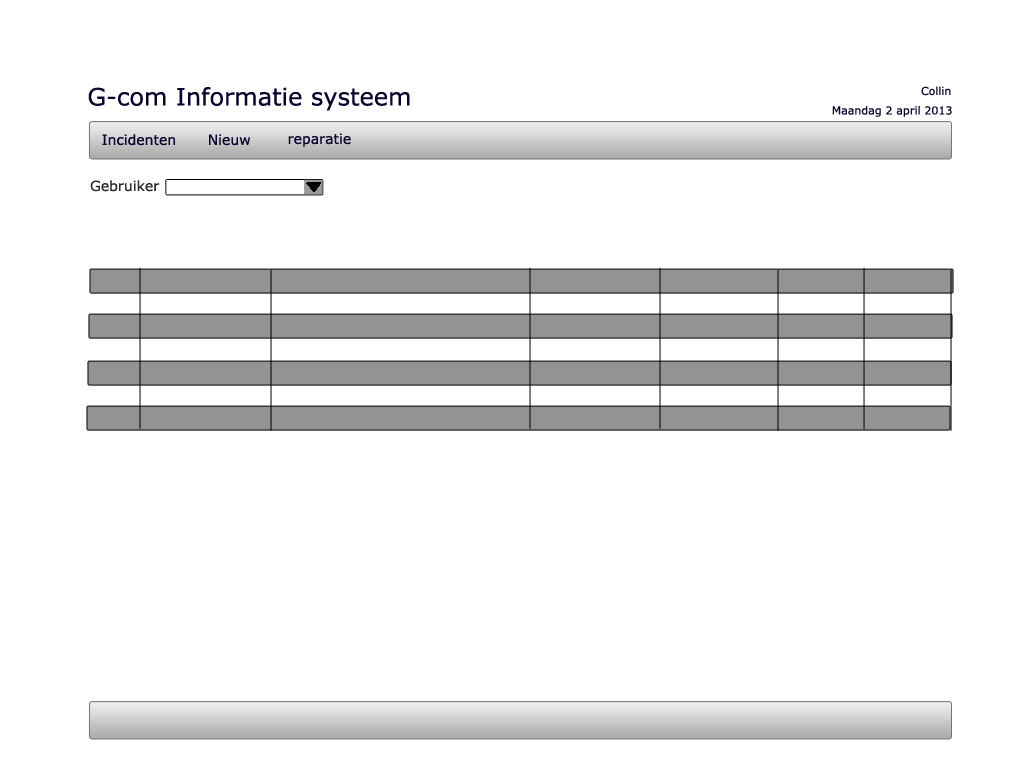
<style>
.page{position:relative;width:1024px;height:768px;background:#ffffff}
.page>*{position:absolute;margin:0}
.t1{font:24px "Verdana";color:#0a052f}
.t2{font:11px "Verdana";color:#0a052f}
.t3{font:14px "Verdana";color:#0a052f}
.t4{font:14px "Verdana";color:#2a2a2a}
</style>
<div class="page">
<p class="t1" style="left:88px;top:87px;width:322px;height:24px">G-com Informatie systeem</p>
<p class="t2" style="left:921px;top:86px;width:30px;height:10px">Collin</p>
<p class="t2" style="left:832px;top:106px;width:120px;height:11px">Maandag 2 april 2013</p>
<p class="t3" style="left:102px;top:134px;width:73px;height:12px">Incidenten</p>
<p class="t3" style="left:209px;top:134px;width:42px;height:12px">Nieuw</p>
<p class="t3" style="left:288px;top:133px;width:63px;height:14px">reparatie</p>
<p class="t4" style="left:90px;top:180px;width:70px;height:12px">Gebruiker</p>
</div>
